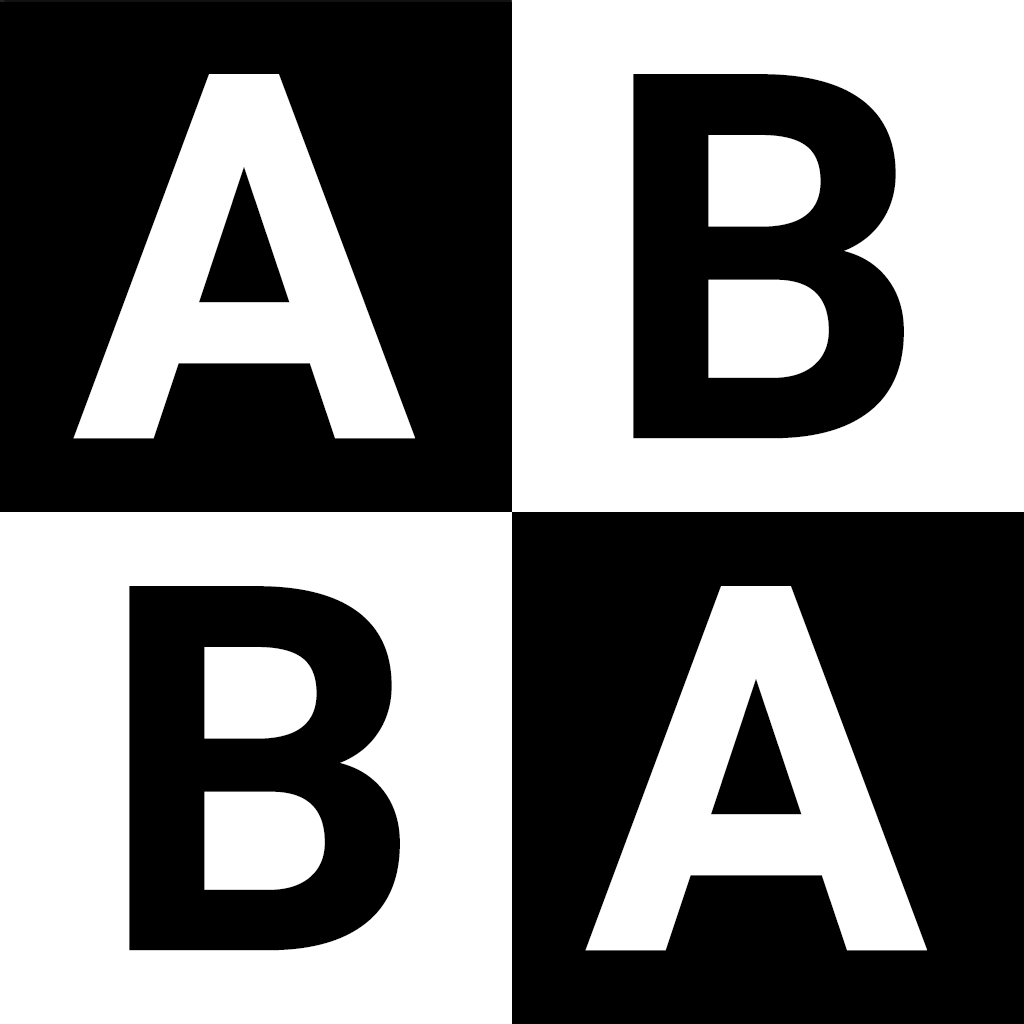
<style>
.page{position:relative;width:1024px;height:1024px;background:#000000}
.page>*{position:absolute;margin:0}
.t1{font:512px "Roboto-Bold";color:#ffffff}
.t2{font:512px "Roboto-Bold";color:#000000}
</style>
<div class="page">
<p class="t1" style="left:73px;top:74px;width:342px;height:365px">A</p>
<p class="t2" style="left:633px;top:74px;width:271px;height:365px">B</p>
<p class="t2" style="left:129px;top:586px;width:271px;height:365px">B</p>
<p class="t1" style="left:585px;top:586px;width:342px;height:365px">A</p>
</div>
